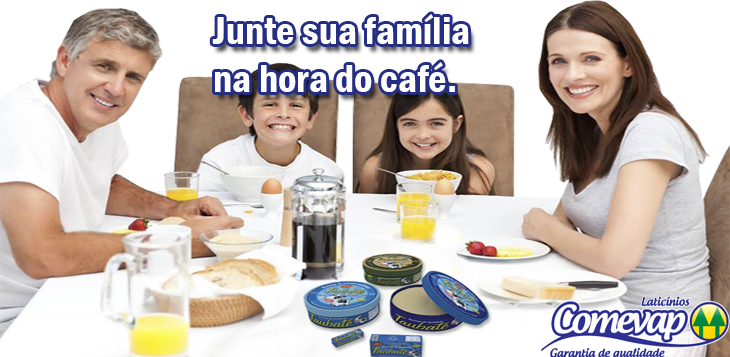
<style>
.page{position:relative;width:730px;height:357px;background:#ffffff}
.page>*{position:absolute;margin:0}
.t1{font:40px "FranklinGothic-DemiCond";color:#ffffff}
</style>
<div class="page">
<p class="t1" style="left:212px;top:14px;width:257px;height:78px">Junte sua família<br>na hora do café.</p>
</div>
